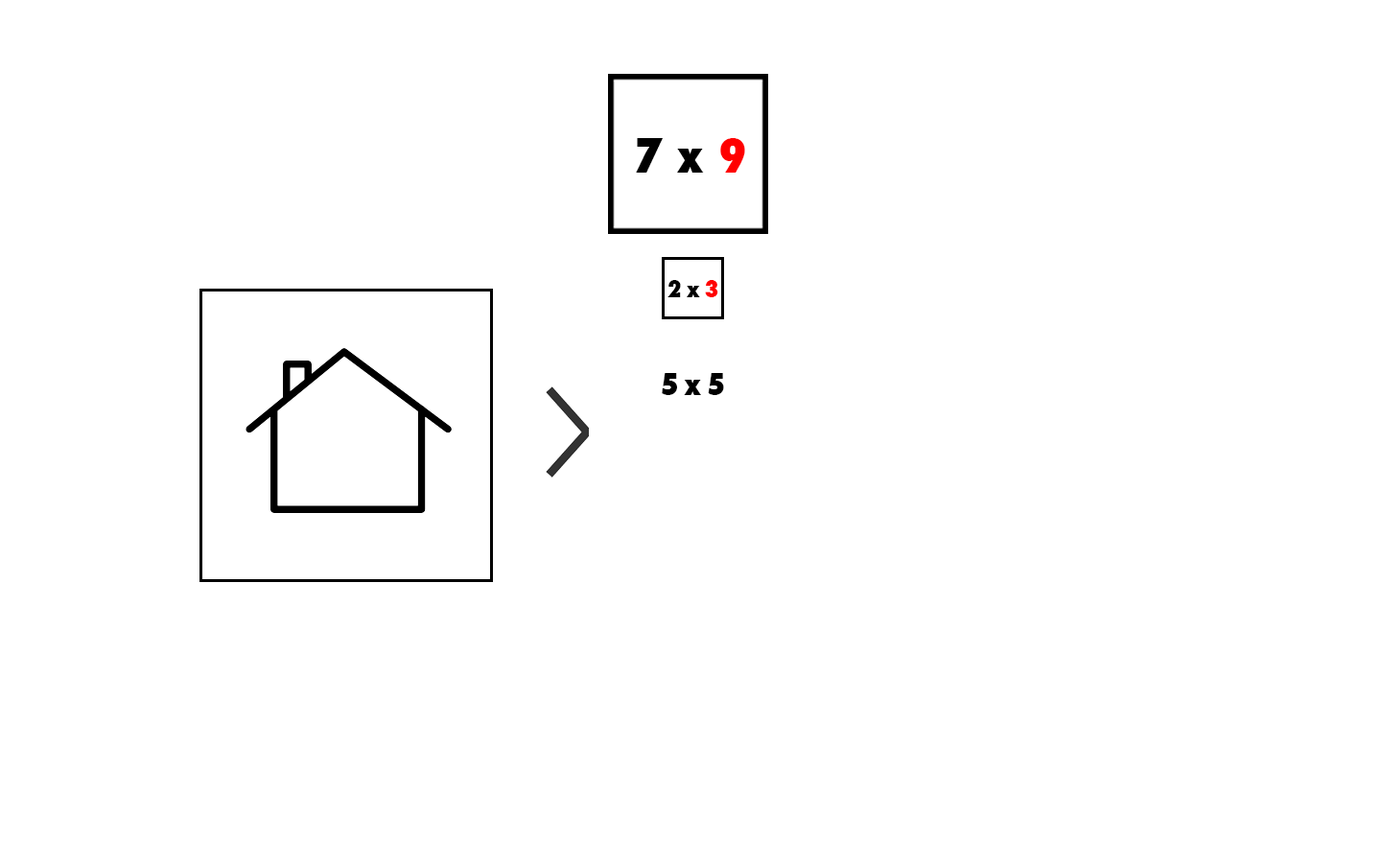
<style>
.page{position:relative;width:1381px;height:863px;background:#ffffff}
.page>*{position:absolute;margin:0}
.t1{font:46px "Futura-CondensedExtraBold";color:#000000;scale:1.05 1}
.t2{font:46px "Futura-CondensedExtraBold";color:#ff0000;scale:1.05 1}
.t3{font:23px "Futura-CondensedExtraBold";letter-spacing:-0.05em;color:#000000;scale:1.05 1}
.t4{font:23px "Futura-CondensedExtraBold";letter-spacing:-0.05em;color:#ff0000;scale:1.05 1}
.t5{font:28.8px "Futura-CondensedExtraBold";letter-spacing:-0.05em;color:#000000;scale:1.05 1}
</style>
<div class="page">
<p class="t1" style="left:636px;top:138px;width:109px;height:35px">7 x <span class="t2">9</span></p>
<p class="t3" style="left:668px;top:280px;width:50px;height:17px">2 x <span class="t4">3</span></p>
<p class="t5" style="left:662px;top:373px;width:62px;height:22px">5 x 5</p>
</div>
